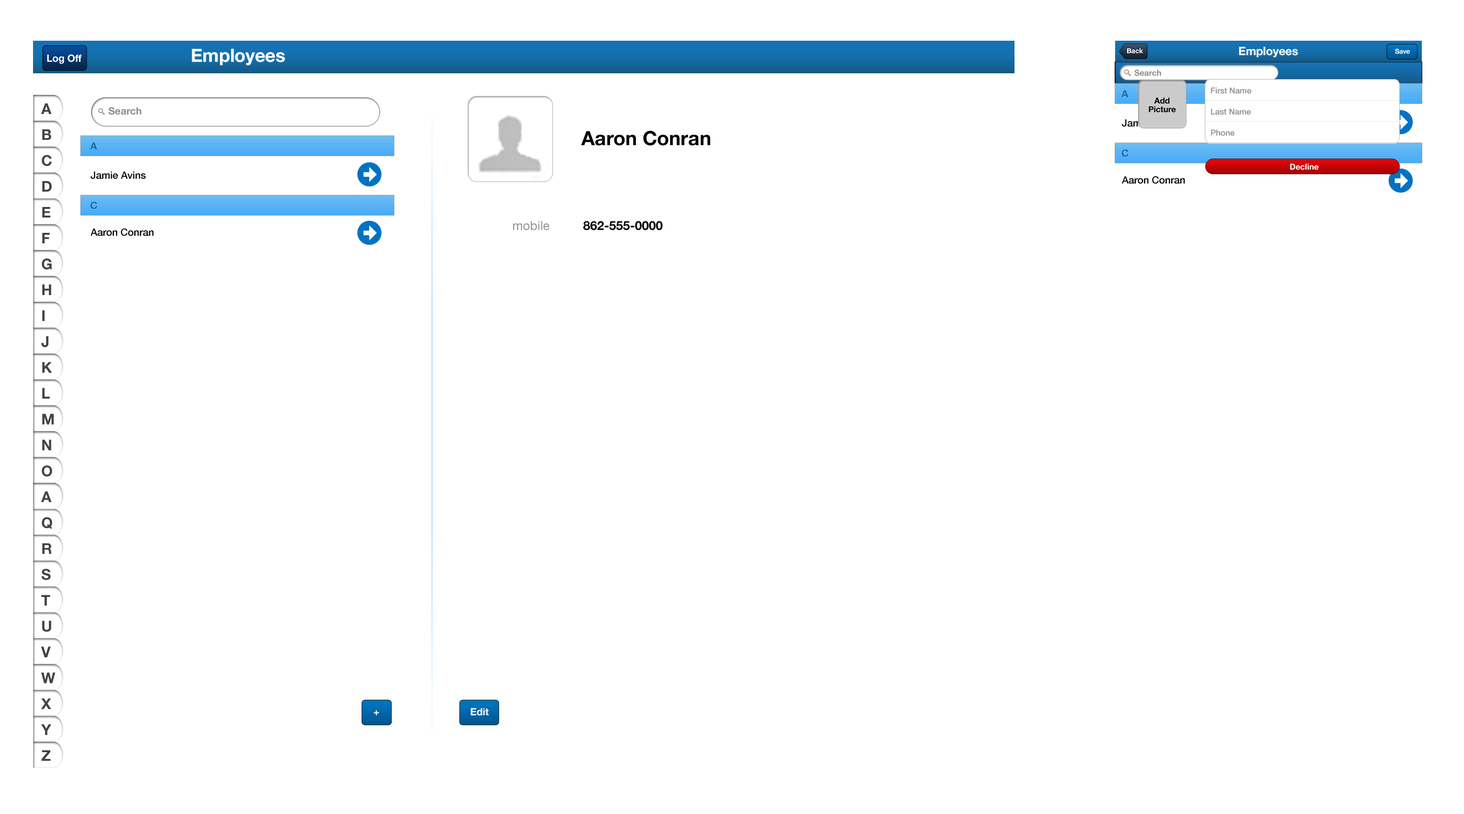
<style>
.page{position:relative;width:1464px;height:814px;background:#ffffff}
.page>*{position:absolute;margin:0}
.t1{font:18.2px "HelveticaNeue-Bold";letter-spacing:-0.005em;color:#fffdfd}
.t2{font:6.7px "HelveticaNeue-Bold";color:#fffdfd}
.t3{font:11.5px "HelveticaNeue-Bold";letter-spacing:-0.005em;color:#fffdfd}
.t4{font:6.7px "HelveticaNeue-Bold";letter-spacing:-0.025em;color:#fffdfd}
.t5{font:6.7px "HelveticaNeue-Bold";letter-spacing:-0.025em}
.t6{font:10.1px "HelveticaNeue-Bold";letter-spacing:-0.005em;color:#fffdfd}
.t7{font:8.1px "HelveticaNeue-Bold";color:#908d8d}
.t8{font:8.1px/21.1px "HelveticaNeue-Medium";color:#8b8b8b}
.t9{font:10.1px "HelveticaNeue-Bold";letter-spacing:-0.005em;color:#0d69a6}
.t10{font:8.1px/8.6px "HelveticaNeue-Bold";color:#040404}
.t11{font:14.9px "HelveticaNeue-Bold";letter-spacing:-0.005em;color:#434343}
.t12{font:10.1px "HelveticaNeue-Bold";color:#908d8d}
.t13{font:10.1px "HelveticaNeue-Medium";letter-spacing:-0.005em}
.t14{font:19.7px "HelveticaNeue-Bold";color:#040404}
.t15{font:10.1px "HelveticaNeue-Medium";letter-spacing:-0.005em;color:#000000}
.t16{font:8.1px "HelveticaNeue-Bold";color:#ffffff}
.t17{font:12.5px "HelveticaNeue";color:#939393}
.t18{font:12.5px "HelveticaNeue-Bold";color:#040404}
</style>
<div class="page">
<p class="t1" style="left:192px;top:48px;width:93px;height:17px">Employees</p>
<p class="t2" style="left:1127px;top:48px;width:17px;height:6px">Back</p>
<p class="t3" style="left:1239px;top:46px;width:59px;height:12px">Employees</p>
<p class="t3" style="left:1239px;top:46px;width:59px;height:12px">Employees</p>
<p class="t4" style="left:1395px;top:48px;width:15px;height:6px">Save</p>
<p class="t5" style="left:1396px;top:49px;width:13px;height:5px">New</p>
<p class="t6" style="left:47px;top:54px;width:35px;height:10px">Log Off</p>
<p class="t7" style="left:1135px;top:69px;width:26px;height:7px">Search</p>
<p class="t8" style="left:1211px;top:87px;width:40px;height:49px">First Name<br>Last Name<br>Phone</p>
<p class="t9" style="left:1121px;top:90px;width:8px;height:7px">A</p>
<p class="t10" style="left:1149px;top:97px;width:27px;height:16px;text-align:center">Add<br>Picture</p>
<p class="t11" style="left:41px;top:103px;width:11px;height:11px">A</p>
<p class="t12" style="left:108px;top:107px;width:33px;height:8px">Search</p>
<p class="t13" style="left:1122px;top:119px;width:55px;height:8px">Jamie Avins</p>
<p class="t11" style="left:42px;top:129px;width:9px;height:11px">B</p>
<p class="t14" style="left:581px;top:131px;width:129px;height:15px">Aaron Conran</p>
<p class="t9" style="left:90px;top:142px;width:7px;height:8px">A</p>
<p class="t9" style="left:1122px;top:149px;width:7px;height:8px">C</p>
<p class="t11" style="left:42px;top:155px;width:10px;height:11px">C</p>
<p class="t15" style="left:91px;top:172px;width:55px;height:7px">Jamie Avins</p>
<p class="t16" style="left:1290px;top:163px;width:29px;height:7px">Decline</p>
<p class="t11" style="left:42px;top:181px;width:10px;height:11px">D</p>
<p class="t15" style="left:1122px;top:176px;width:63px;height:8px">Aaron Conran</p>
<p class="t11" style="left:42px;top:207px;width:8px;height:11px">E</p>
<p class="t9" style="left:90px;top:201px;width:7px;height:8px">C</p>
<p class="t17" style="left:513px;top:221px;width:37px;height:10px">mobile</p>
<p class="t18" style="left:583px;top:221px;width:80px;height:10px">862-555-0000</p>
<p class="t11" style="left:42px;top:233px;width:8px;height:10px">F</p>
<p class="t15" style="left:91px;top:228px;width:63px;height:8px">Aaron Conran</p>
<p class="t11" style="left:42px;top:258px;width:10px;height:12px">G</p>
<p class="t11" style="left:42px;top:284px;width:9px;height:11px">H</p>
<p class="t11" style="left:42px;top:310px;width:3px;height:11px">I</p>
<p class="t11" style="left:41px;top:336px;width:7px;height:11px">J</p>
<p class="t11" style="left:42px;top:362px;width:10px;height:11px">K</p>
<p class="t11" style="left:42px;top:388px;width:8px;height:11px">L</p>
<p class="t11" style="left:42px;top:414px;width:12px;height:11px">M</p>
<p class="t11" style="left:42px;top:440px;width:9px;height:11px">N</p>
<p class="t11" style="left:42px;top:465px;width:10px;height:12px">O</p>
<p class="t11" style="left:41px;top:491px;width:11px;height:11px">A</p>
<p class="t11" style="left:41px;top:491px;width:11px;height:11px">A</p>
<p class="t11" style="left:42px;top:517px;width:10px;height:12px">Q</p>
<p class="t11" style="left:42px;top:544px;width:10px;height:10px">R</p>
<p class="t11" style="left:41px;top:569px;width:10px;height:11px">S</p>
<p class="t11" style="left:41px;top:595px;width:9px;height:11px">T</p>
<p class="t11" style="left:42px;top:621px;width:9px;height:11px">U</p>
<p class="t11" style="left:41px;top:647px;width:10px;height:11px">V</p>
<p class="t11" style="left:41px;top:672px;width:15px;height:11px">W</p>
<p class="t11" style="left:41px;top:698px;width:10px;height:11px">X</p>
<p class="t6" style="left:374px;top:710px;width:5px;height:6px">+</p>
<p class="t6" style="left:471px;top:708px;width:18px;height:8px">Edit</p>
<p class="t11" style="left:41px;top:724px;width:10px;height:11px">Y</p>
<p class="t11" style="left:41px;top:751px;width:10px;height:10px">Z</p>
</div>
